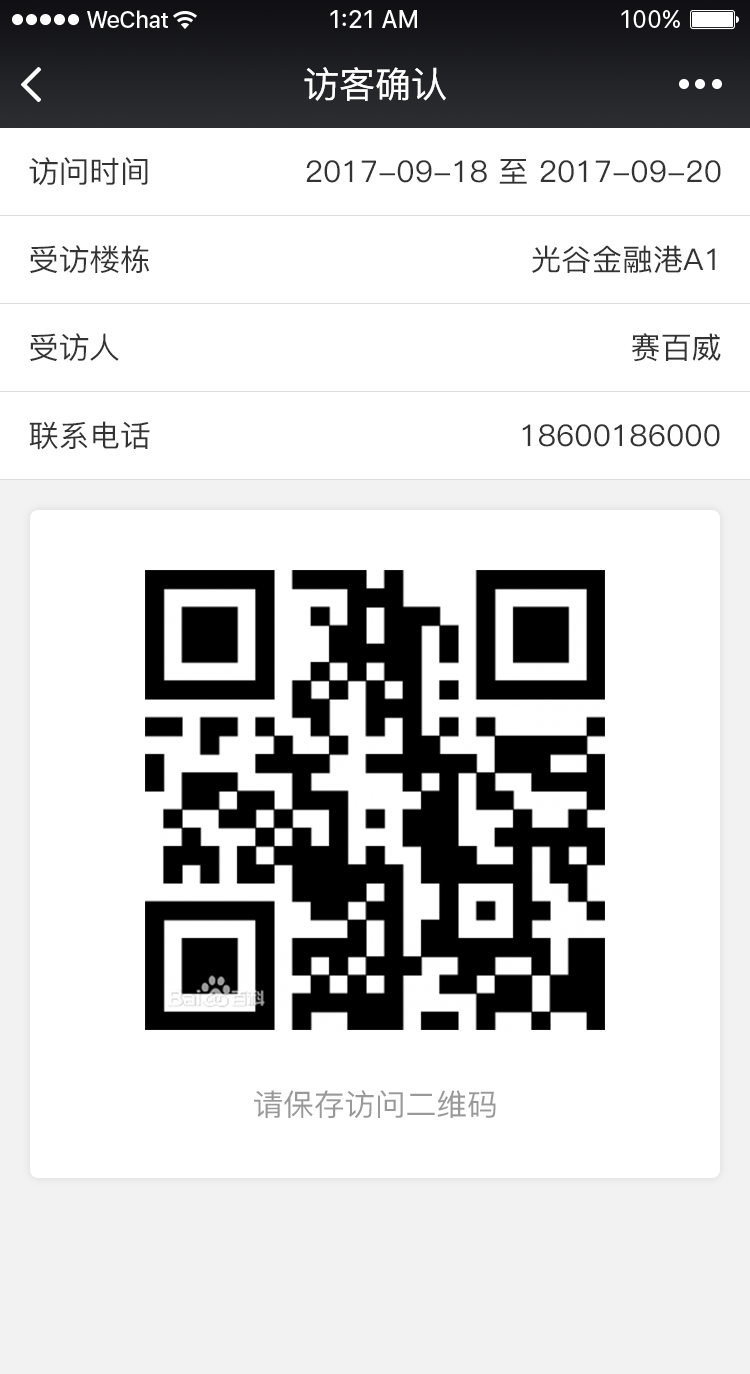
<style>
.page{position:relative;width:750px;height:1374px;background:#ffffff}
.page>*{position:absolute;margin:0}
.t1{font:36px "PingFang-SC-Medium";color:#ffffff}
.t2{font:30px "PingFang-SC-Medium";color:#333333}
.t3{font:30px "PingFang-SC-Medium";color:#999999}
</style>
<div class="page">
<p class="t1" style="left:304px;top:67px;width:142px;height:34px">访客确认</p>
<p class="t2" style="left:29px;top:157px;width:119px;height:28px">访问时间</p>
<p class="t2" style="left:306px;top:159px;width:415px;height:25px">2017-09-18 至 2017-09-20</p>
<p class="t2" style="left:30px;top:245px;width:120px;height:28px">受访楼栋</p>
<p class="t2" style="left:532px;top:245px;width:183px;height:28px">光谷金融港A1</p>
<p class="t2" style="left:30px;top:333px;width:89px;height:28px">受访人</p>
<p class="t2" style="left:631px;top:333px;width:90px;height:29px">赛百威</p>
<p class="t2" style="left:29px;top:421px;width:121px;height:29px">联系电话</p>
<p class="t2" style="left:522px;top:424px;width:198px;height:23px">18600186000</p>
<p class="t3" style="left:254px;top:1090px;width:242px;height:28px">请保存访问二维码</p>
</div>
